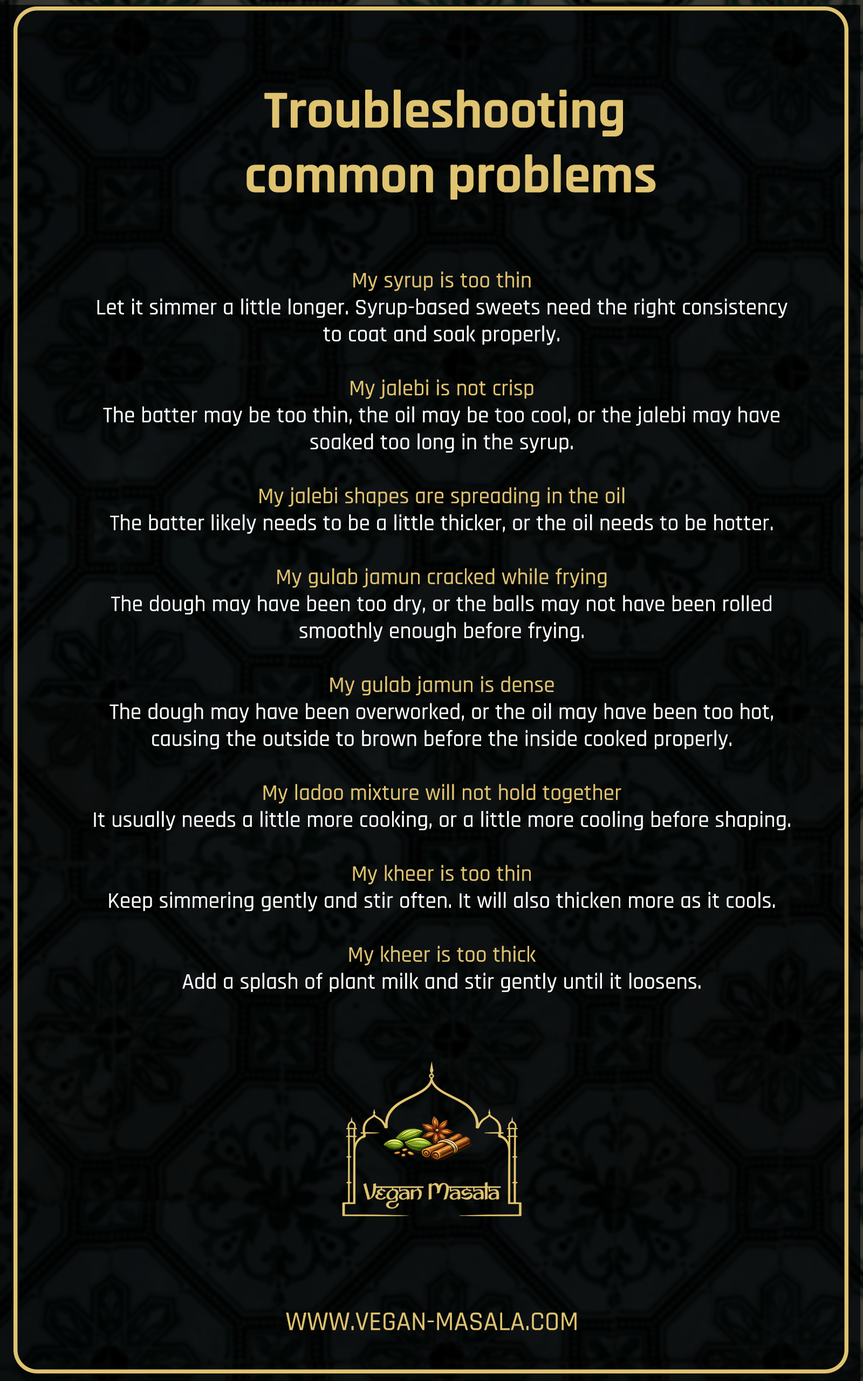
<style>
.page{position:relative;width:863px;height:1381px}
.page>*{position:absolute;margin:0}
.t1{font:54px "Rajdhani-Bold";color:#dfc370}
.t2{font:22.5px "Rajdhani-Medium";color:#ffffff}
.t3{font:22.5px "Rajdhani-Medium";color:#dfc370}
.t4{font:27px "Rajdhani-Medium";color:#dfc370}
</style>
<div class="page">
<p class="t1" style="left:247px;top:90px;width:409px;height:110px;text-align:center">Troubleshooting <br>common problems</p>
<p class="t2" style="left:94px;top:271px;width:696px;height:722px;text-align:center"><span class="t3">My syrup is too thin </span> <br>Let it simmer a little longer. Syrup-based sweets need the right consistency to coat and soak properly.<br><br><span class="t3">My jalebi is not crisp </span> <br>The batter may be too thin, the oil may be too cool, or the jalebi may have soaked too long in the syrup.<br><br><span class="t3">My jalebi shapes are spreading in the oil </span> <br>The batter likely needs to be a little thicker, or the oil needs to be hotter.<br><br><span class="t3">My gulab jamun cracked while frying  <br></span>The dough may have been too dry, or the balls may not have been rolled smoothly enough before frying.<br><br><span class="t3">My gulab jamun is dense </span> <br>The dough may have been overworked, or the oil may have been too hot, causing the outside to brown before the inside cooked properly.<br><br><span class="t3">My ladoo mixture will not hold together  <br></span>It usually needs a little more cooking, or a little more cooling before shaping.<br><br><span class="t3">My kheer is too thin  <br></span>Keep simmering gently and stir often. It will also thicken more as it cools.<br><br><span class="t3">My kheer is too thick  <br></span>Add a splash of plant milk and stir gently until it loosens.<br><br>My halwa is dry  <br>It has likely cooked too long. Add a small splash of plant milk and stir gently over low heat.<br><br>My mango lassi is too thick  <br>Blend in a little more plant milk until it reaches the texture you like.</p>
<p class="t4" style="left:286px;top:1313px;width:291px;height:18px">WWW.VEGAN-MASALA.COM</p>
</div>
